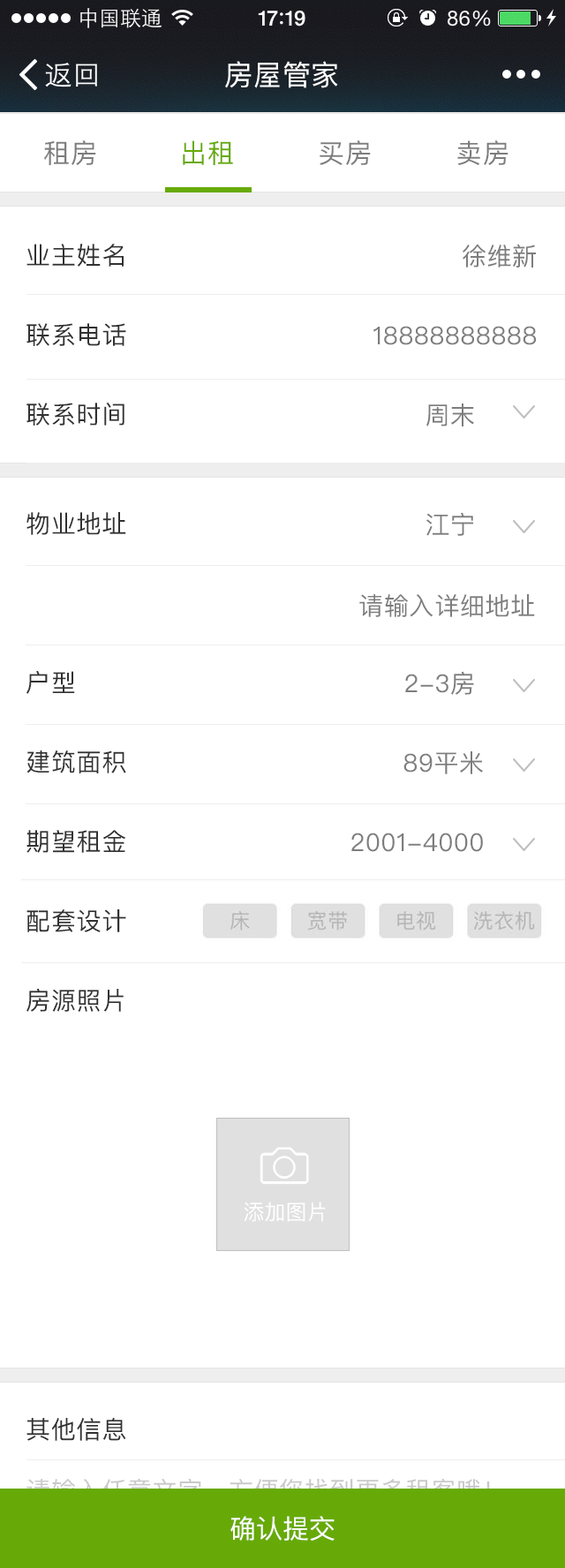
<style>
.page{position:relative;width:565px;height:1568px;background:#ffffff}
.page>*{position:absolute;margin:0}
.t1{font:28.3px "PingFangSC-Regular";letter-spacing:0.025em;color:#ffffff}
.t2{font:26.5px "PingFangSC-Regular";letter-spacing:0.025em;color:#7d7d7d}
.t3{font:26.5px "PingFangSC-Regular";letter-spacing:0.025em;color:#67aa07}
.t4{font:24.7px/79.5px "PingFangSC-Regular";letter-spacing:0.025em;color:#313131}
.t5{font:24.7px/79.5px "PingFangSC-Regular";letter-spacing:0.025em;color:#7d7d7d}
.t6{font:24.7px "PingFangSC-Regular";letter-spacing:0.025em;color:#7d7d7d}
.t7{font:21.2px "PingFangSC-Regular";color:#ffffff}
.t8{font:24.7px "PingFangSC-Regular";letter-spacing:0.025em;color:#313131}
.t9{font:26.5px "PingFangSC-Regular";color:#ffffff}
</style>
<div class="page">
<p class="t1" style="left:225px;top:61px;width:113px;height:27px">房屋管家</p>
<p class="t2" style="left:44px;top:140px;width:52px;height:25px">租房</p>
<p class="t3" style="left:183px;top:140px;width:50px;height:25px">出租</p>
<p class="t2" style="left:320px;top:140px;width:51px;height:25px">买房</p>
<p class="t2" style="left:457px;top:140px;width:52px;height:25px">卖房</p>
<p class="t4" style="left:26px;top:244px;width:100px;height:182px">业主姓名<br>联系电话<br>联系时间</p>
<p class="t5" style="left:373px;top:244px;width:163px;height:182px;text-align:right">徐维新<br>18888888888<br>周末</p>
<p class="t4" style="left:26px;top:512px;width:100px;height:500px">物业地址<br><br>户型<br>建筑面积<br>期望租金<br>配套设计<br>房源照片</p>
<p class="t5" style="left:351px;top:512px;width:132px;height:340px;text-align:right">江宁       <br><br>2-3房       <br>89平米      <br>2001-4000</p>
<p class="t6" style="left:359px;top:594px;width:176px;height:23px">请输入详细地址</p>
<p class="t7" style="left:244px;top:1202px;width:82px;height:20px">添加图片</p>
<p class="t8" style="left:26px;top:1417px;width:100px;height:24px">其他信息</p>
<p class="t9" style="left:230px;top:1516px;width:105px;height:25px">确认提交</p>
</div>
